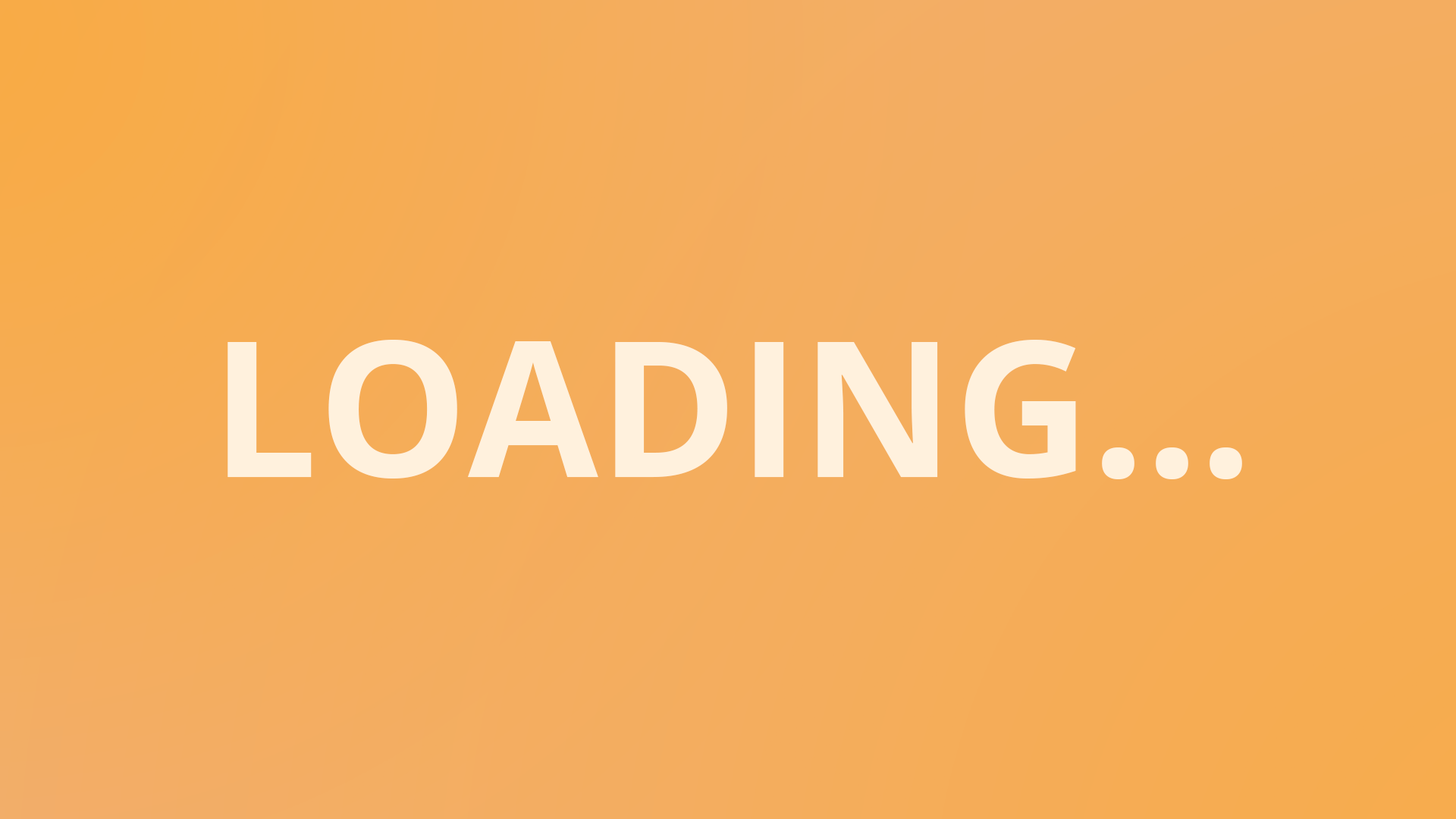
<style>
.page{position:relative;width:1456px;height:819px}
.page>*{position:absolute;margin:0}
.t1{font:189.6px "OpenSans-Bold";color:#fff1dd}
.t2{font:49px "OpenSans-Bold";color:#8f8b8b}
</style>
<div class="page">
<p class="t1" style="left:227px;top:340px;width:1015px;height:139px"><span class="t2"><br><br><br></span><br>LOADING...</p>
</div>
